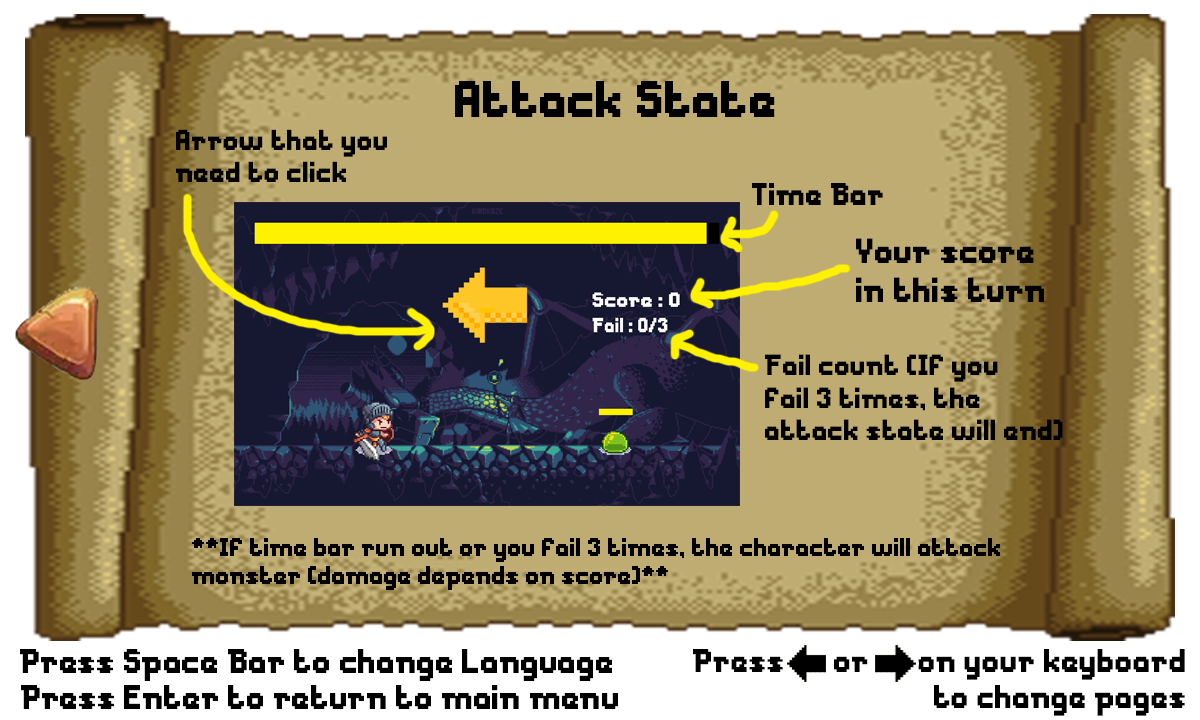
<style>
.page{position:relative;width:1200px;height:720px}
.page>*{position:absolute;margin:0}
.t1{font:48px "Messe-Duesseldorf";color:#000000}
.t2{font:27.1px "Messe-Duesseldorf";color:#000000}
.t3{font:29.3px "Messe-Duesseldorf";color:#000000}
.t4{font:32.7px "Messe-Duesseldorf";color:#000000}
.t5{font:27.2px "Messe-Duesseldorf";color:#000000}
.t6{font:24px "Messe-Duesseldorf";color:#000000}
.t7{font:32px "Messe-Duesseldorf";color:#000000}
.t8{font:30.5px "Messe-Duesseldorf";color:#000000}
</style>
<div class="page">
<p class="t1" style="left:455px;top:81px;width:320px;height:36px">Attack State</p>
<p class="t2" style="left:176px;top:129px;width:211px;height:53px">Arrow that you <br>need to click</p>
<p class="t3" style="left:752px;top:183px;width:131px;height:22px">Time Bar</p>
<p class="t4" style="left:856px;top:238px;width:188px;height:64px">Your score <br>in this turn</p>
<p class="t5" style="left:765px;top:354px;width:298px;height:86px">Fail count (If you <br>fail 3 times, the <br>attack state will end)</p>
<p class="t6" style="left:192px;top:538px;width:808px;height:52px">**If time bar run out or you fail 3 times, the character will attack <br>monster (damage depends on score)**</p>
<p class="t7" style="left:20px;top:649px;width:592px;height:32px">Press Space Bar to change Language</p>
<p class="t8" style="left:693px;top:649px;width:492px;height:67px;text-align:right">Press &lt;- or -&gt; on your keyboard <br>to change pages</p>
<p class="t7" style="left:21px;top:685px;width:597px;height:24px">Press Enter to return to main menu</p>
</div>
